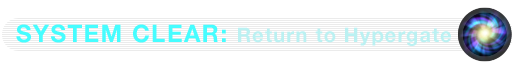
<style>
.page{position:relative;width:512px;height:64px;background:#ffffff}
.page>*{position:absolute;margin:0}
.t1{font:20px "HelveticaNeue-Bold";letter-spacing:0.06em;color:#bbf1f2}
.t2{font:24px "HelveticaNeue-Bold";letter-spacing:0.06em;color:#46fdff}
</style>
<div class="page">
<p class="t1" style="left:16px;top:24px;width:435px;height:22px"><span class="t2">SYSTEM CLEAR: </span>Return to Hypergate</p>
</div>
